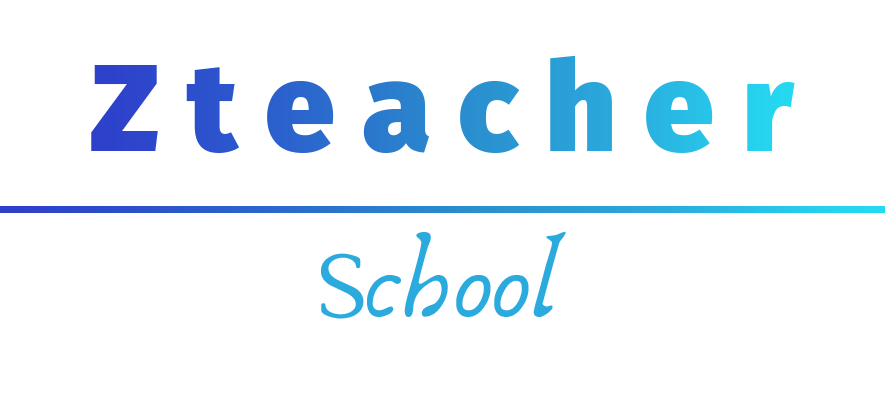
<style>
.page{position:relative;width:885px;height:401px;background:#ffffff}
.page>*{position:absolute;margin:0}
.t1{font:125px "FiraSans-Black"}
.t2{font:100px "Anaktoria";color:#2aaadd}
</style>
<div class="page">
<p class="t1" style="left:91px;top:55px;width:704px;height:98px">Z t e a c h e r</p>
<p class="t2" style="left:321px;top:232px;width:245px;height:87px">School</p>
</div>
